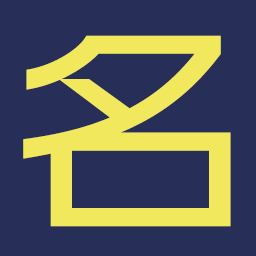
<style>
.page{position:relative;width:256px;height:256px;background:#272f59}
.page>*{position:absolute;margin:0}
.t1{font:218.4px "VDL-LogoG-Regular";letter-spacing:-0.06em;color:#f2e85e;font-weight:bold;scale:1.08 1}
</style>
<div class="page">
<p class="t1" style="left:23px;top:35px;width:208px;height:192px">名</p>
</div>
